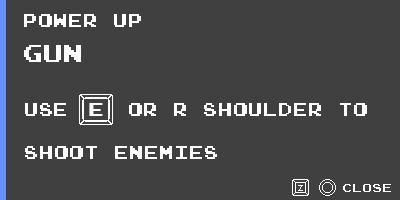
<style>
.page{position:relative;width:400px;height:200px;background:#404040}
.page>*{position:absolute;margin:0}
.t1{font:18px "JoystixMonospace-Regular";color:#ffffff}
.t2{font:24px "JoystixMonospace-Regular";color:#ffffff}
.t3{font:11px "ArialMT";color:#ffffff}
.t4{font:12px "JoystixMonospace-Regular";color:#ffffff}
</style>
<div class="page">
<p class="t1" style="left:24px;top:14px;width:117px;height:13px">Power Up</p>
<p class="t2" style="left:24px;top:45px;width:57px;height:17px">GUN</p>
<p class="t1" style="left:25px;top:103px;width:342px;height:56px">USE    or R shoulder to<br><br>shoot Enemies</p>
<p class="t1" style="left:89px;top:103px;width:14px;height:13px">E</p>
<p class="t3" style="left:298px;top:185px;width:5px;height:6px">z</p>
<p class="t4" style="left:343px;top:184px;width:48px;height:8px">close</p>
</div>
